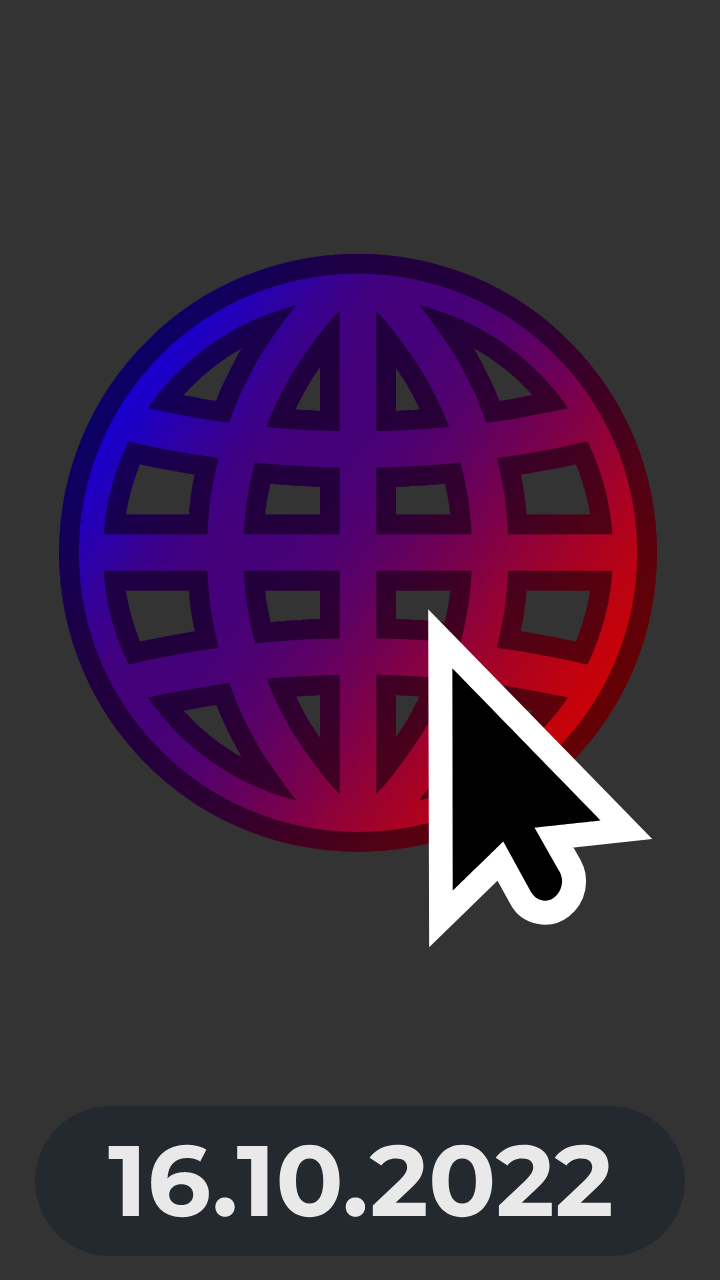
<style>
.page{position:relative;width:720px;height:1280px;background:#333333}
.page>*{position:absolute;margin:0}
.t1{font:100px "Montserrat-Bold";color:#e9e9e9}
</style>
<div class="page">
<p class="t1" style="left:108px;top:1144px;width:503px;height:74px">16.10.2022</p>
</div>
